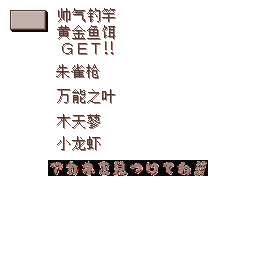
<style>
.page{position:relative;width:256px;height:256px;background:#ffffff}
.page>*{position:absolute;margin:0}
.t1{font:15px "SimSun";color:#503830}
</style>
<div class="page">
<p class="t1" style="left:58px;top:8px;width:57px;height:14px">帅气钓竿</p>
<p class="t1" style="left:57px;top:25px;width:58px;height:14px">黄金鱼饵</p>
<p class="t1" style="left:56px;top:64px;width:43px;height:14px">朱雀枪</p>
<p class="t1" style="left:57px;top:89px;width:58px;height:14px">万能之叶</p>
<p class="t1" style="left:57px;top:114px;width:43px;height:14px">木天蓼</p>
<p class="t1" style="left:57px;top:136px;width:43px;height:14px">小龙虾</p>
</div>
